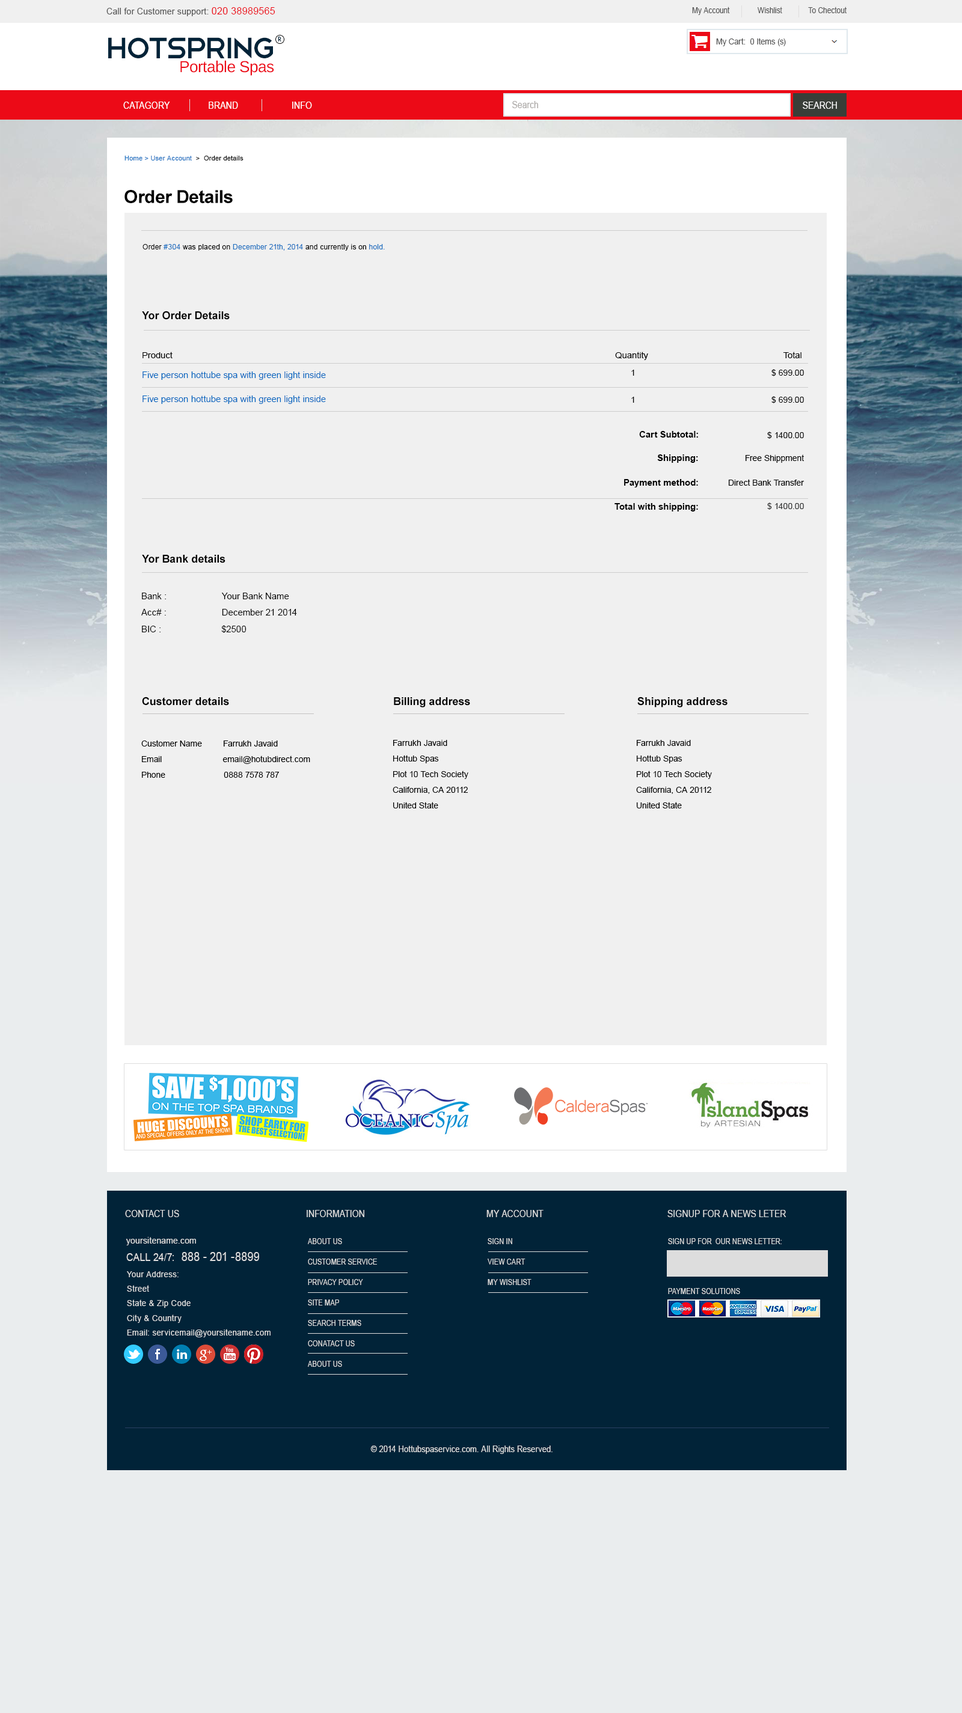
<style>
.page{position:relative;width:962px;height:1713px;background:#f0f0f0}
.page>*{position:absolute;margin:0}
.t1{font:8.8px "ArialMT";letter-spacing:0.02em;color:#555555;scale:0.95 1}
.t2{font:10.1px "ArialMT";letter-spacing:0.02em;color:#ec0a17;scale:0.95 1}
.t3{font:8.3px "ArialMT";color:#555555;scale:0.87 1}
.t4{font:38.5px "Telegrafico";letter-spacing:-0.08em;color:#012338}
.t5{font:6.3px "HarmoniaSansStd-Regular";letter-spacing:0.03em;color:#012338}
.t6{font:8.2px "ArialMT";color:#555555;scale:0.95 1}
.t7{font:15.9px "LiberationSans";letter-spacing:-0.02em;color:#ec0a17}
.t8{font:9.7px "ArialMT";letter-spacing:0.01em;color:#ffffff;scale:0.87 1}
.t9{font:9.7px "ArialMT";color:#aeaba9;scale:0.87 1}
.t10{font:9.7px "ArialMT";color:#ffffff;scale:0.87 1}
.t11{font:6.6px "ArialMT";letter-spacing:0.02em;color:#1d70c0}
.t12{font:6.6px "ArialMT";letter-spacing:0.02em;color:#000000}
.t13{font:18px "Arial-BoldMT";letter-spacing:-0.02em;color:#000000}
.t14{font:7.2px "ArialMT";letter-spacing:0.02em;color:#1d70c0}
.t15{font:7.2px "ArialMT";letter-spacing:0.02em;color:#000000}
.t16{font:10.8px "Arial-BoldMT";color:#000000}
.t17{font:8.4px "ArialMT";color:#000000;scale:1.05 1}
.t18{font:9px "ArialMT";color:#0066c0}
.t19{font:8.4px "ArialMT";color:#000000}
.t20{font:9px "Arial-BoldMT";color:#000000}
.t21{font:8.4px "ArialMT";color:#2c2d2d}
.t22{font:9px "ArialMT";color:#000000}
.t23{font:9.7px "ArialMT";letter-spacing:0.01em;color:#dddddd;scale:0.87 1}
.t24{font:9.2px "ArialMT";letter-spacing:0.03em;color:#dddddd;scale:0.9 1}
.t25{font:7.6px/20.4px "ArialMT";letter-spacing:0.01em;color:#dddddd;scale:0.87 1}
.t26{font:7.6px "ArialMT";letter-spacing:0.01em;color:#dddddd;scale:0.87 1}
.t27{font:12.4px "ArialMT";letter-spacing:0.01em;color:#dddddd;scale:0.87 1}
.t28{font:11.1px "ArialMT";letter-spacing:0.01em;color:#dddddd;scale:0.87 1}
.t29{font:8.5px/14.5px "ArialMT";letter-spacing:0.03em;color:#dddddd;scale:0.94 1}
.t30{font:9px "ArialMT";letter-spacing:0.01em;color:#dddddd;scale:0.87 1}
</style>
<div class="page">
<p class="t1" style="left:106px;top:7px;width:169px;height:9px">Call for Customer support: <span class="t2">020 38989565</span></p>
<p class="t3" style="left:692px;top:7px;width:154px;height:8px">My Account              Wishlist             To Chectout</p>
<p class="t4" style="left:108px;top:37px;width:165px;height:21px">HotSpring</p>
<p class="t5" style="left:278px;top:37px;width:3px;height:4px">R</p>
<p class="t6" style="left:716px;top:38px;width:70px;height:8px">My Cart:  0 Items (s)</p>
<p class="t7" style="left:180px;top:60px;width:94px;height:16px">Portable Spas</p>
<p class="t8" style="left:123px;top:102px;width:189px;height:7px">CATAGORY                BRAND                      INFO</p>
<p class="t9" style="left:512px;top:101px;width:26px;height:7px">Search</p>
<p class="t10" style="left:802px;top:102px;width:35px;height:7px">SEARCH</p>
<p class="t11" style="left:124px;top:156px;width:119px;height:4px">Home &gt; User Account <span class="t12"> &gt;  Order details</span></p>
<p class="t13" style="left:124px;top:190px;width:109px;height:13px">Order Details</p>
<p class="t14" style="left:142px;top:244px;width:243px;height:7px"><span class="t15">Order </span>#304<span class="t15"> was placed on </span>December 21th, 2014<span class="t15"> and currently is on </span>hold.</p>
<p class="t16" style="left:142px;top:311px;width:88px;height:9px">Yor Order Details</p>
<p class="t17" style="left:142px;top:352px;width:659px;height:8px">Product                                                                                                                                                                                    Quantity                                                       Total</p>
<p class="t18" style="left:142px;top:371px;width:184px;height:9px">Five person hottube spa with green light inside</p>
<p class="t19" style="left:631px;top:370px;width:3px;height:6px">1</p>
<p class="t19" style="left:771px;top:369px;width:33px;height:7px">$ 699.00</p>
<p class="t18" style="left:142px;top:395px;width:184px;height:9px">Five person hottube spa with green light inside</p>
<p class="t19" style="left:631px;top:397px;width:3px;height:6px">1</p>
<p class="t19" style="left:771px;top:396px;width:33px;height:7px">$ 699.00</p>
<p class="t20" style="left:639px;top:431px;width:59px;height:7px">Cart Subtotal:</p>
<p class="t19" style="left:767px;top:432px;width:37px;height:7px">$ 1400.00</p>
<p class="t20" style="left:657px;top:454px;width:41px;height:9px">Shipping:</p>
<p class="t19" style="left:745px;top:454px;width:59px;height:9px">Free Shippment</p>
<p class="t20" style="left:624px;top:479px;width:74px;height:8px">Payment method:</p>
<p class="t19" style="left:728px;top:479px;width:76px;height:7px">Direct Bank Transfer</p>
<p class="t20" style="left:614px;top:503px;width:84px;height:8px">Total with shipping:</p>
<p class="t21" style="left:767px;top:502px;width:37px;height:8px">$ 1400.00</p>
<p class="t16" style="left:142px;top:555px;width:83px;height:8px">Yor Bank details</p>
<p class="t22" style="left:141px;top:593px;width:156px;height:40px">Bank :                      Your Bank Name <br>Acc# :                      December 21 2014<br>BIC :                        $2500</p>
<p class="t16" style="left:142px;top:697px;width:87px;height:9px">Customer details</p>
<p class="t16" style="left:394px;top:697px;width:76px;height:10px">Billing address</p>
<p class="t16" style="left:637px;top:697px;width:90px;height:10px">Shipping address</p>
<p class="t19" style="left:141px;top:740px;width:169px;height:38px">Customer Name         Farrukh Javaid<br>Email                          email@hotubdirect.com <br>Phone                         0888 7578 787</p>
<p class="t19" style="left:392px;top:740px;width:76px;height:68px">Farrukh Javaid<br>Hottub Spas <br>Plot 10 Tech Society <br>California, CA 20112<br>United State</p>
<p class="t19" style="left:636px;top:740px;width:76px;height:68px">Farrukh Javaid<br>Hottub Spas <br>Plot 10 Tech Society <br>California, CA 20112<br>United State</p>
<p class="t23" style="left:125px;top:1210px;width:54px;height:7px">CONTACT US</p>
<p class="t23" style="left:307px;top:1210px;width:57px;height:7px">INFORMATION</p>
<p class="t23" style="left:486px;top:1210px;width:57px;height:7px">MY ACCOUNT</p>
<p class="t23" style="left:667px;top:1210px;width:119px;height:7px">SIGNUP FOR A NEWS LETER</p>
<p class="t24" style="left:126px;top:1237px;width:70px;height:8px">yoursitename.com</p>
<p class="t25" style="left:308px;top:1238px;width:69px;height:129px;text-align:justify">ABOUT US<br>CUSTOMER SERVICE<br>PRIVACY POLICY <br>SITE MAP<br>SEARCH TERMS<br>CONATACT US<br>ABOUT US</p>
<p class="t25" style="left:487px;top:1238px;width:44px;height:47px;text-align:justify">SIGN IN<br>VIEW CART<br>MY WISHLIST</p>
<p class="t26" style="left:668px;top:1238px;width:113px;height:6px">SIGN UP FOR  OUR NEWS LETTER:</p>
<p class="t27" style="left:126px;top:1252px;width:133px;height:9px"><span class="t28">CALL 24/7:  </span>888 - 201 -8899</p>
<p class="t29" style="left:127px;top:1271px;width:143px;height:66px;text-align:justify">Your Address:<br>Street<br>State &amp; Zip Code<br>City &amp; Country <br>Email: servicemail@yoursitename.com</p>
<p class="t26" style="left:668px;top:1288px;width:72px;height:6px">PAYMENT SOLUTIONS</p>
<p class="t30" style="left:370px;top:1445px;width:182px;height:9px">© 2014 Hottubspaservice.com. All Rights Reserved.</p>
</div>
